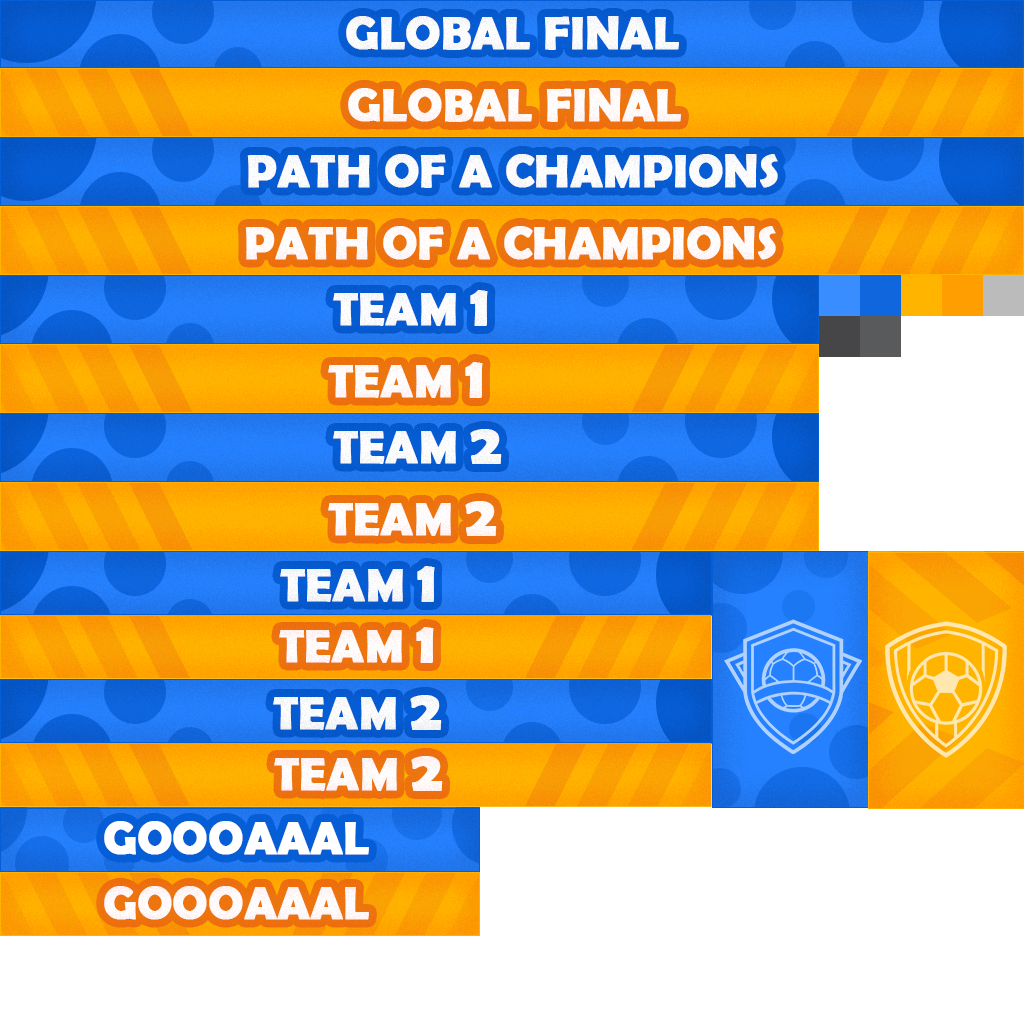
<style>
.page{position:relative;width:1024px;height:1024px;background:#ffffff}
.page>*{position:absolute;margin:0}
.t1{font:45.8px "BerlinSansFBDemi-Bold";color:#ffffff;text-transform:uppercase;font-weight:bold}
.t2{font:58.3px "BerlinSansFBDemi-Bold";color:#ffffff;text-transform:uppercase;font-weight:bold}
</style>
<div class="page">
<p class="t1" style="left:346px;top:16px;width:333px;height:34px">Global Final</p>
<p class="t1" style="left:348px;top:88px;width:333px;height:34px">Global Final</p>
<p class="t1" style="left:247px;top:154px;width:531px;height:34px">path of a champions</p>
<p class="t1" style="left:245px;top:226px;width:531px;height:34px">path of a champions</p>
<p class="t1" style="left:333px;top:290px;width:155px;height:36px">Team <span class="t2">1</span></p>
<p class="t1" style="left:328px;top:362px;width:155px;height:36px">team <span class="t2">1</span></p>
<p class="t1" style="left:333px;top:429px;width:169px;height:35px">Team <span class="t2">2</span></p>
<p class="t1" style="left:328px;top:501px;width:169px;height:35px">team <span class="t2">2</span></p>
<p class="t1" style="left:280px;top:566px;width:155px;height:36px">Team <span class="t2">1</span></p>
<p class="t1" style="left:279px;top:627px;width:155px;height:36px">team <span class="t2">1</span></p>
<p class="t1" style="left:273px;top:695px;width:169px;height:35px">Team <span class="t2">2</span></p>
<p class="t1" style="left:274px;top:756px;width:169px;height:35px">team <span class="t2">2</span></p>
<p class="t1" style="left:104px;top:821px;width:265px;height:34px">Goooaaal</p>
<p class="t1" style="left:104px;top:886px;width:265px;height:34px">Goooaaal</p>
</div>
